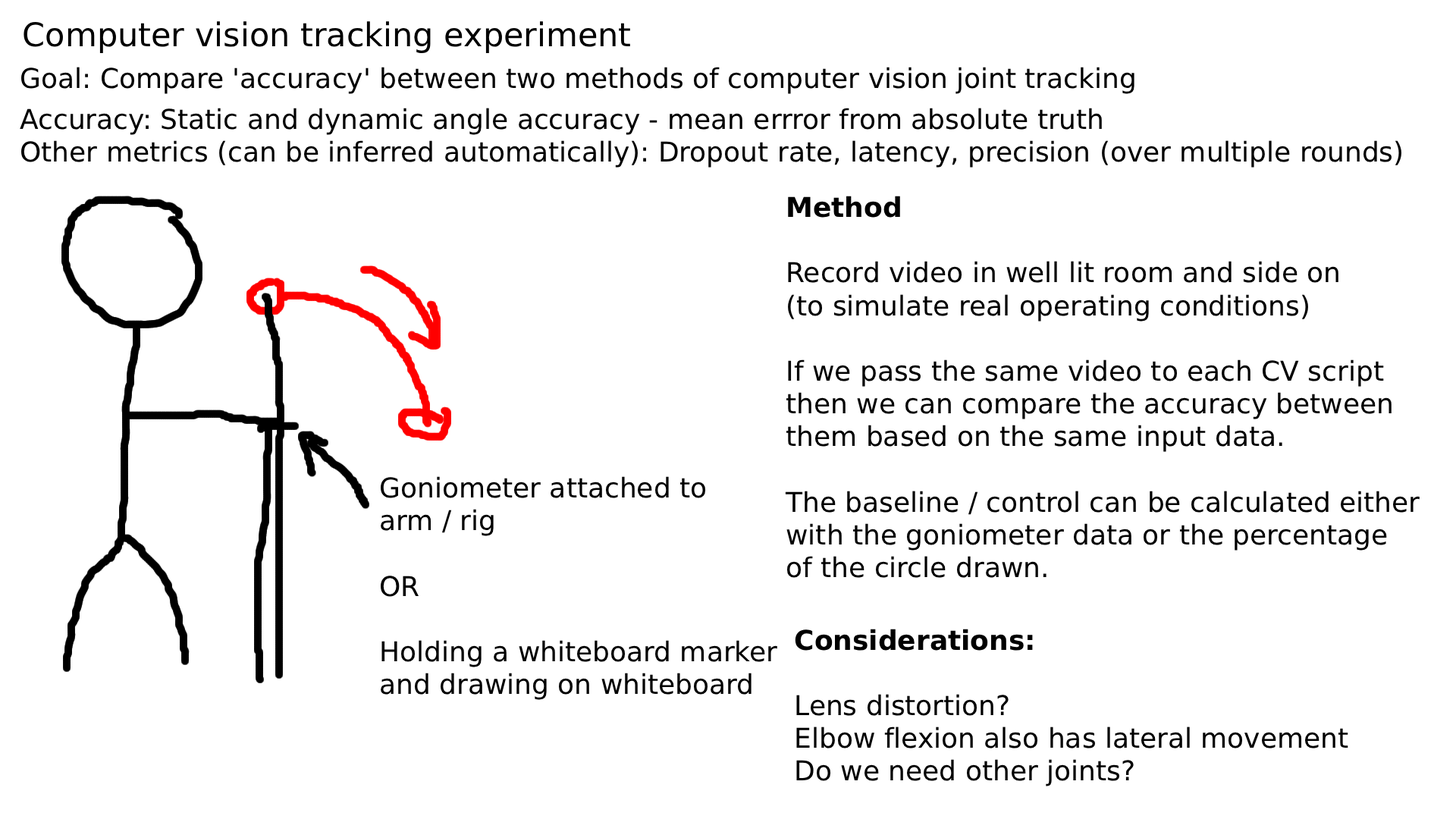
<style>
.page{position:relative;width:1456px;height:819px;background:#ffffff}
.page>*{position:absolute;margin:0}
.t1{font:32.6px "DejaVuSans";color:#000000}
.t2{font:27.3px "DejaVuSans";color:#000000}
.t3{font:27.3px "DejaVuSans-Bold";color:#000000}
</style>
<div class="page">
<p class="t1" style="left:24px;top:21px;width:606px;height:32px">Computer vision tracking experiment</p>
<p class="t2" style="left:21px;top:67px;width:1113px;height:27px">Goal: Compare 'accuracy' between two methods of computer vision joint tracking</p>
<p class="t2" style="left:20px;top:108px;width:1381px;height:60px">Accuracy: Static and dynamic angle accuracy - mean errror from absolute truth<br>Other metrics (can be inferred automatically): Dropout rate, latency, precision (over multiple rounds)</p>
<p class="t2" style="left:785px;top:196px;width:635px;height:382px"><span class="t3">Method<br><br></span>Record video in well lit room and side on<br>(to simulate real operating conditions)<br><br>If we pass the same video to each CV script<br>then we can compare the accuracy between<br>them based on the same input data.<br><br>The baseline / control can be calculated either<br>with the goniometer data or the percentage<br>of the circle drawn.</p>
<p class="t2" style="left:381px;top:476px;width:396px;height:224px">Goniometer attached to<br>arm / rig<br><br>OR<br><br>Holding a whiteboard marker<br>and drawing on whiteboard</p>
<p class="t2" style="left:795px;top:629px;width:553px;height:157px"><span class="t3">Considerations:<br><br></span>Lens distortion? <br>Elbow flexion also has lateral movement<br>Do we need other joints?</p>
</div>
